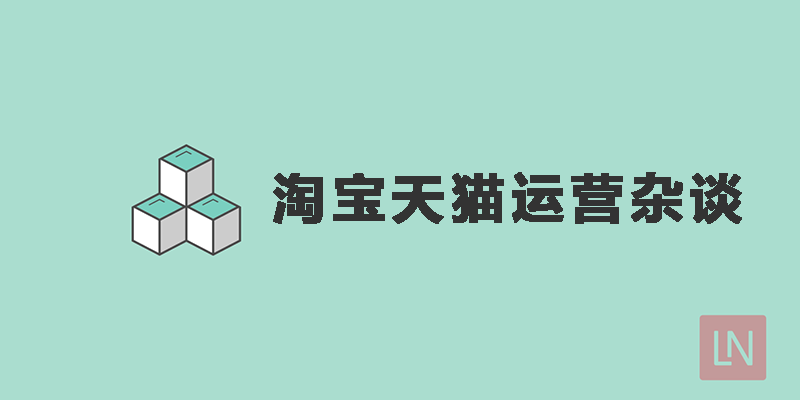
<style>
.page{position:relative;width:800px;height:400px;background:#aaddcf}
.page>*{position:absolute;margin:0}
.t1{font:52px "MicrosoftYaHei-Bold";letter-spacing:0.12em;color:#333333;font-weight:bold}
</style>
<div class="page">
<p class="t1" style="left:273px;top:172px;width:469px;height:52px">淘宝天猫运营杂谈</p>
</div>
